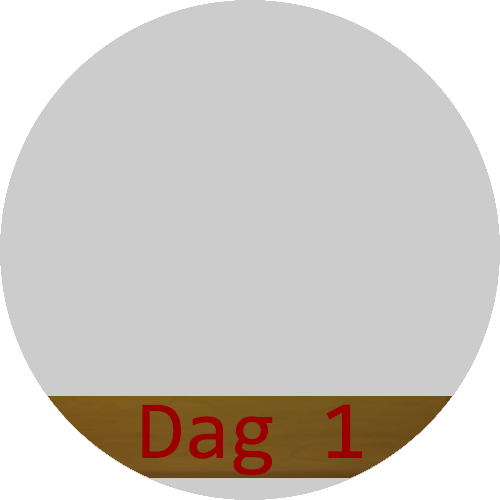
<style>
.page{position:relative;width:500px;height:500px;background:#cccccc}
.page>*{position:absolute;margin:0}
.t1{font:83.3px "Consolas";color:#9b0000}
</style>
<div class="page">
<p class="t1" style="left:142px;top:404px;width:220px;height:72px">Dag 1</p>
</div>
